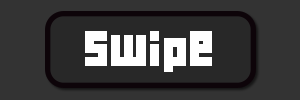
<style>
.page{position:relative;width:300px;height:100px;background:#333333}
.page>*{position:absolute;margin:0}
.t1{font:44px "04b19";letter-spacing:0.025em;color:#ffffff}
</style>
<div class="page">
<p class="t1" style="left:85px;top:31px;width:127px;height:41px">Swipe</p>
</div>
